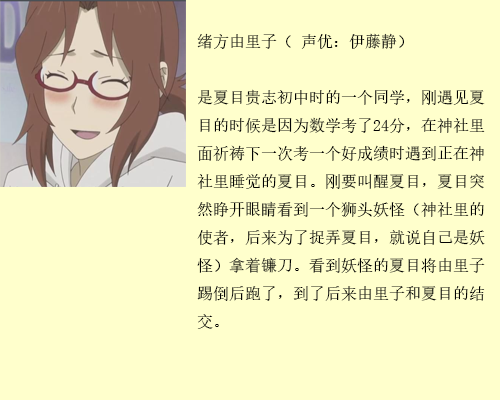
<style>
.page{position:relative;width:500px;height:400px;background:#ffffcc}
.page>*{position:absolute;margin:0}
.t1{font:16px "SimSun";color:#020202}
</style>
<div class="page">
<p class="t1" style="left:197px;top:33px;width:288px;height:296px">绪方由里子（ 声优：伊藤静）<br><br>是夏目贵志初中时的一个同学，刚遇见夏<br>目的时候是因为数学考了24分，在神社里<br>面祈祷下一次考一个好成绩时遇到正在神<br>社里睡觉的夏目。刚要叫醒夏目，夏目突<br>然睁开眼睛看到一个狮头妖怪（神社里的<br>使者，后来为了捉弄夏目，就说自己是妖<br>怪）拿着镰刀。看到妖怪的夏目将由里子<br>踢倒后跑了，到了后来由里子和夏目的结<br>交。</p>
</div>
